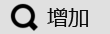
<style>
.page{position:relative;width:110px;height:34px;background:#e0e0e0}
.page>*{position:absolute;margin:0}
.t1{font:21px "MicrosoftYaHei";color:#0b0b0b}
</style>
<div class="page">
<p class="t1" style="left:47px;top:8px;width:41px;height:19px">增加</p>
</div>
